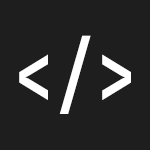
<style>
.page{position:relative;width:150px;height:150px;background:#1e1e1e}
.page>*{position:absolute;margin:0}
.t1{font:83.2px "JetBrainsMonoRoman-Bold";letter-spacing:0.05em;color:#ffffff;scale:0.77 1}
</style>
<div class="page">
<p class="t1" style="left:19px;top:35px;width:112px;height:79px">&lt;/&gt;</p>
</div>
